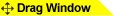
<style>
.page{position:relative;width:114px;height:16px;background:#fffc00}
.page>*{position:absolute;margin:0}
.t1{font:12px "Arial-BoldMT";letter-spacing:-0.025em;color:#000000}
</style>
<div class="page">
<p class="t1" style="left:17px;top:3px;width:74px;height:12px">Drag Window</p>
</div>
